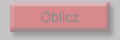
<style>
.page{position:relative;width:120px;height:40px;background:#d7898b}
.page>*{position:absolute;margin:0}
.t1{font:14px "ArialMT";color:#8b898b}
</style>
<div class="page">
<p class="t1" style="left:41px;top:11px;width:38px;height:12px">Oblicz</p>
</div>
